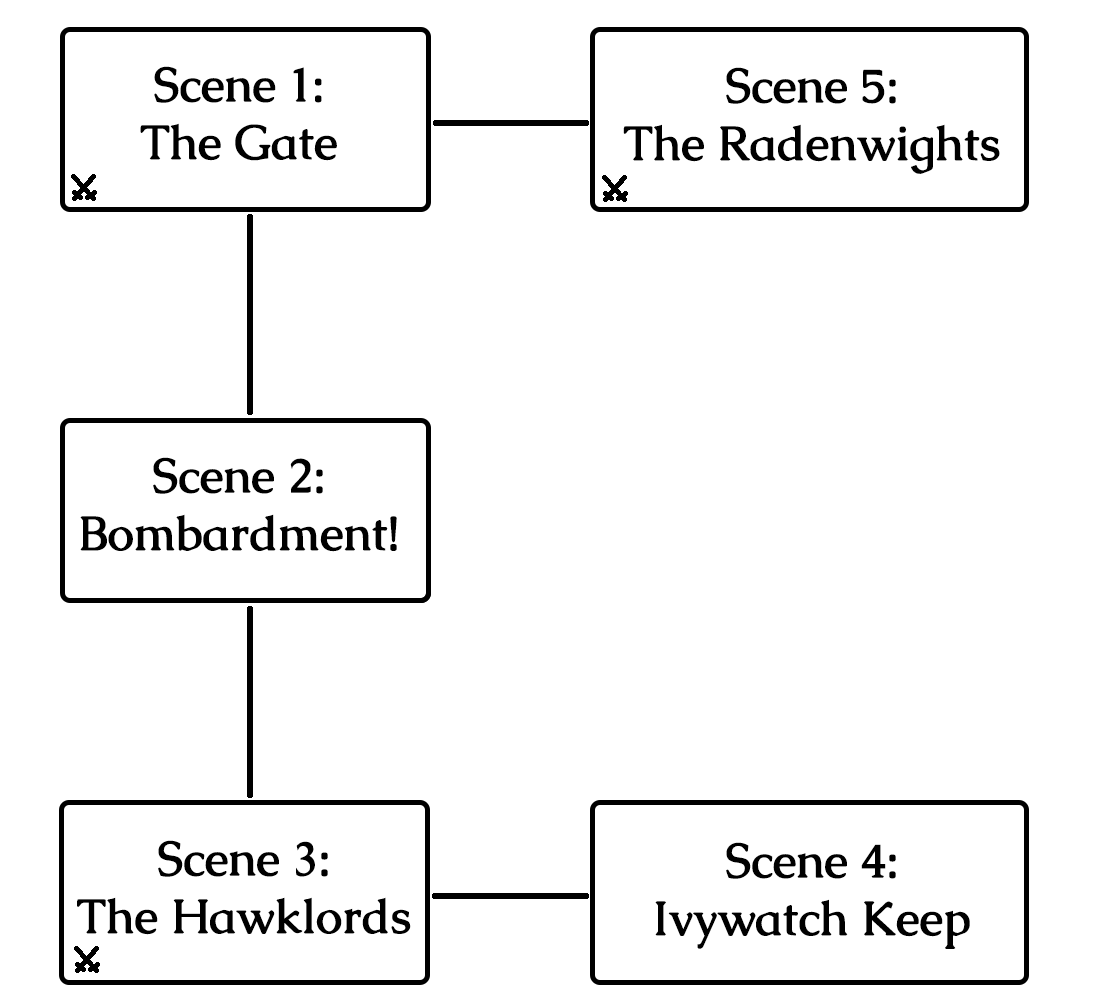
<style>
.page{position:relative;width:1100px;height:1000px;background:#ffffff}
.page>*{position:absolute;margin:0}
.t1{font:48px "Caudex-Bold";color:#000000}
</style>
<div class="page">
<p class="t1" style="left:140px;top:66px;width:197px;height:95px;text-align:center">Scene 1:<br>The Gate</p>
<p class="t1" style="left:623px;top:67px;width:377px;height:107px;text-align:center">Scene 5:<br>The Radenwights</p>
<p class="t1" style="left:80px;top:457px;width:317px;height:95px;text-align:center">Scene 2:<br>Bombardment!</p>
<p class="t1" style="left:77px;top:840px;width:334px;height:95px;text-align:center">Scene 3:<br>The Hawklords</p>
<p class="t1" style="left:655px;top:842px;width:315px;height:107px;text-align:center">Scene 4:<br>Ivywatch Keep</p>
</div>
